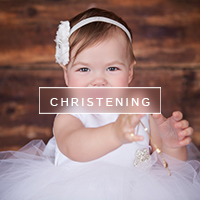
<style>
.page{position:relative;width:200px;height:200px}
.page>*{position:absolute;margin:0}
.t1{font:11.7px "IstokWeb-Regular";letter-spacing:0.2em;color:#ffffff;text-transform:uppercase}
</style>
<div class="page">
<p class="t1" style="left:50px;top:98px;width:100px;height:8px">christening</p>
</div>
